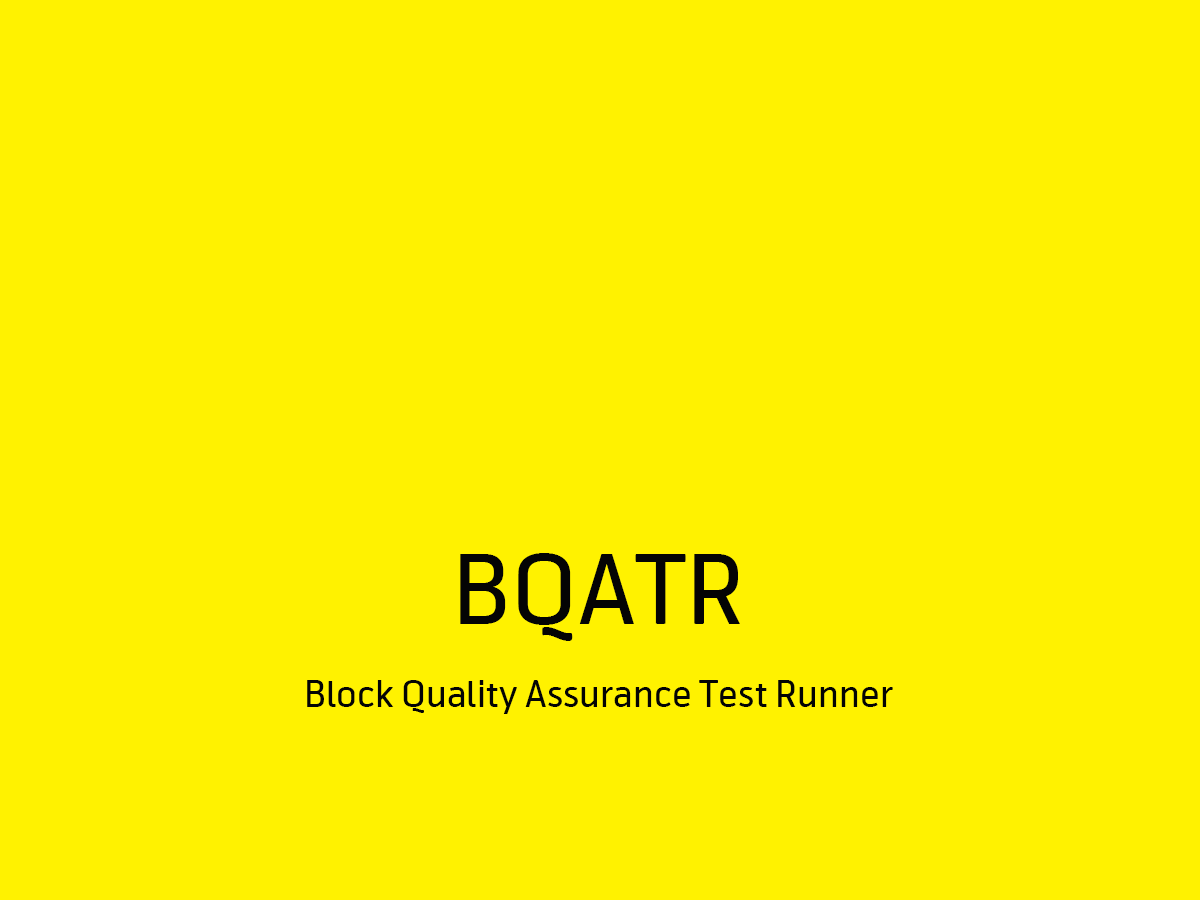
<style>
.page{position:relative;width:1200px;height:900px;background:#fff200}
.page>*{position:absolute;margin:0}
.t1{font:96px "Telenor";color:#040404}
.t2{font:36px "Telenor";color:#040404}
</style>
<div class="page">
<p class="t1" style="left:460px;top:553px;width:280px;height:88px">BQATR</p>
<p class="t2" style="left:307px;top:680px;width:586px;height:34px">Block Quality Assurance Test Runner</p>
</div>
